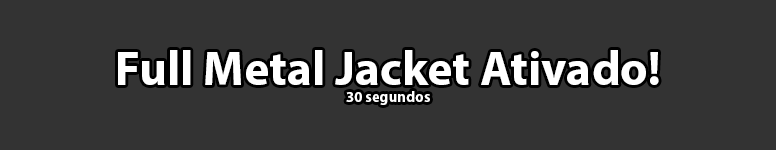
<style>
.page{position:relative;width:776px;height:150px;background:#333333}
.page>*{position:absolute;margin:0}
.t1{font:48px/17px "MyriadPro-Bold";color:#ffffff}
.t2{font:48px/17px "MyriadPro-Bold";color:#000000}
.t3{font:15px/17px "MyriadPro-Bold";color:#ffffff}
</style>
<div class="page">
<p class="t1" style="left:118px;top:50px;width:541px;height:55px;text-align:center"><span class="t2"><br><br><br></span>Full Metal Jacket Ativado!<br><span class="t3">30 segundos</span></p>
</div>
